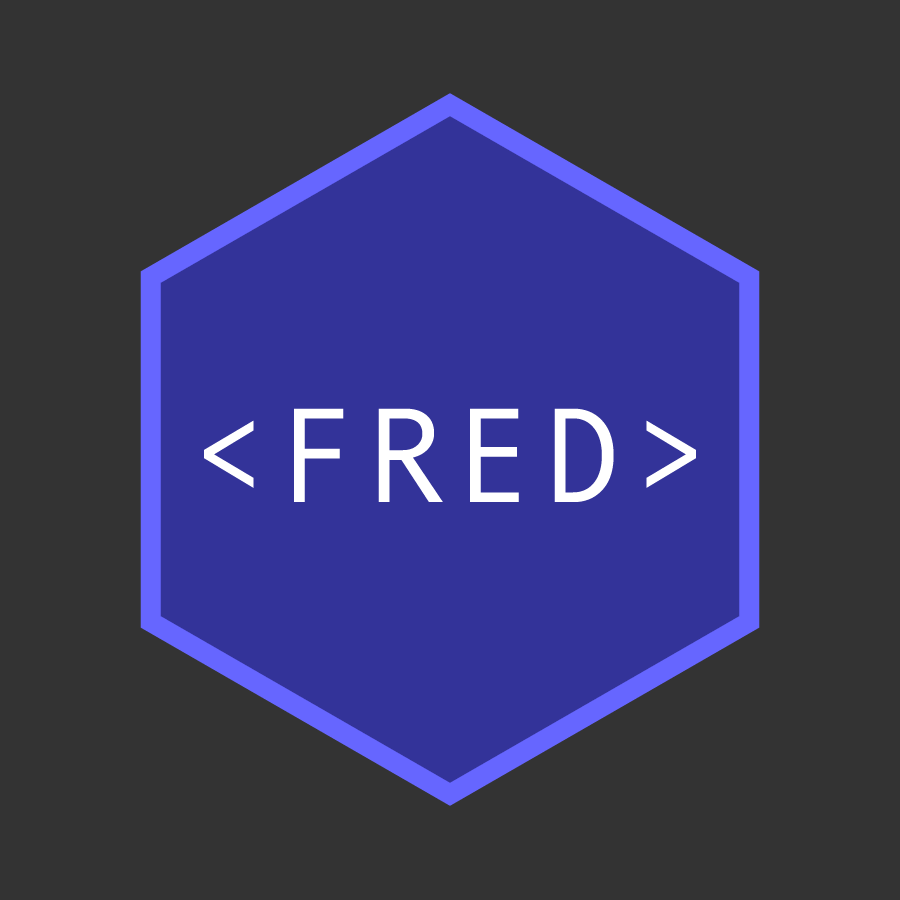
<style>
.page{position:relative;width:900px;height:900px;background:#333333}
.page>*{position:absolute;margin:0}
.t1{font:135.6px "AndaleMono";letter-spacing:0.05em;color:#ffffff}
</style>
<div class="page">
<p class="t1" style="left:204px;top:408px;width:492px;height:94px">&lt;FRED&gt;</p>
</div>
